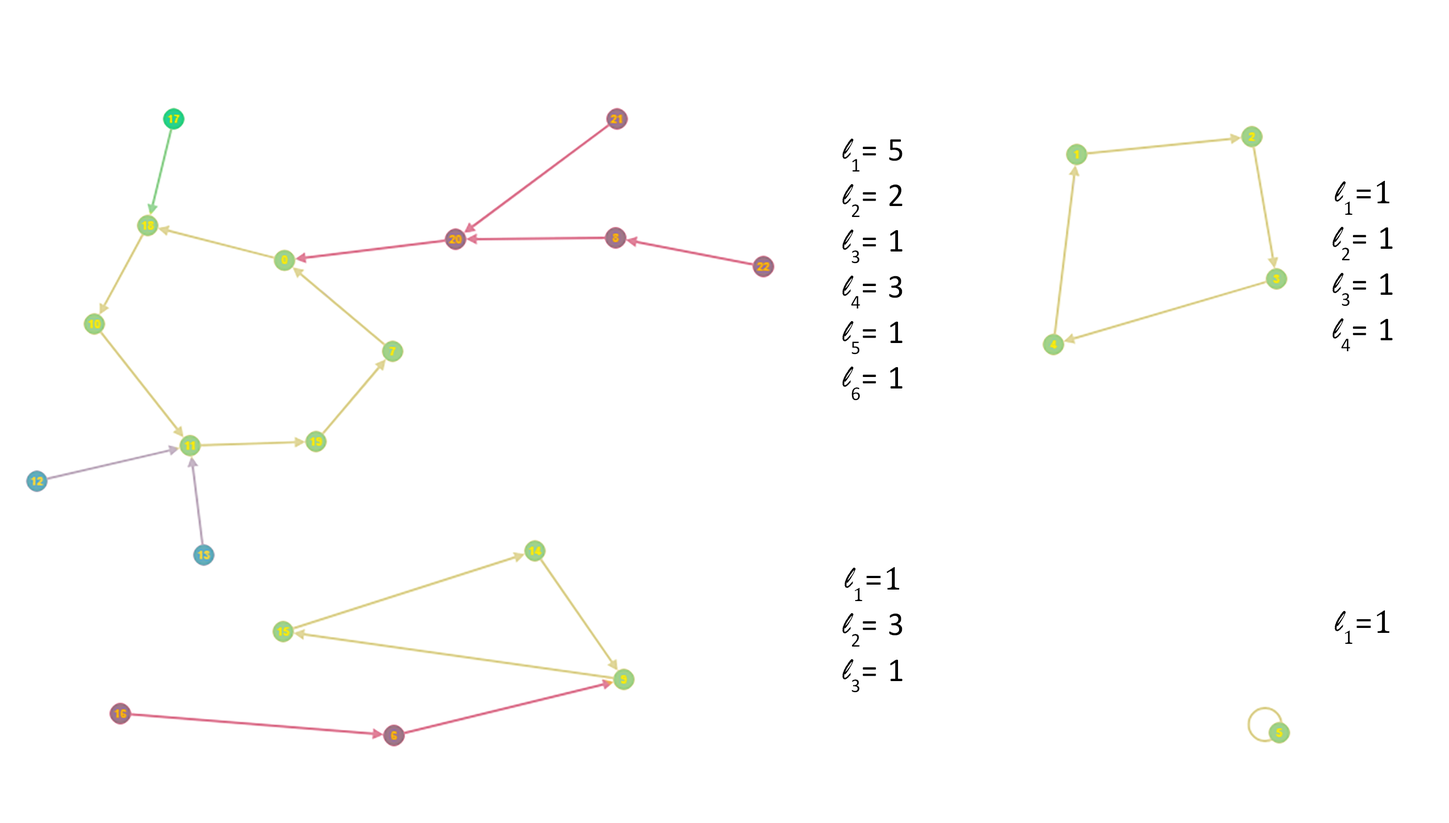
<style>
.page{position:relative;width:1449px;height:823px;background:#ffffff}
.page>*{position:absolute;margin:0}
.t1{font:33.6px/45.7px "Calibri";letter-spacing:0.04em;color:#000000;scale:0.97 1}
.t2{font:33.6px/45.7px "RageItalic";letter-spacing:0.04em;color:#000000;scale:0.97 1}
.t3{font:33.6px/45.7px "Cambria";letter-spacing:0.04em;color:#000000;scale:0.97 1}
.t4{font:33.6px "Cambria";letter-spacing:0.04em;color:#000000;scale:0.97 1}
.t5{font:33.6px "RageItalic";letter-spacing:0.04em;color:#000000;scale:0.97 1}
</style>
<div class="page">
<p class="t1" style="left:842px;top:139px;width:60px;height:262px;text-align:center"><span class="t2">l</span>1= 5<br><span class="t2">l</span>2= 2<br><span class="t2">l</span>3= 1<br><span class="t2">l</span>4= 3<br><span class="t2">l</span>5= 1<br><span class="t2">l</span>6= 1</p>
<p class="t1" style="left:1332px;top:181px;width:60px;height:170px;text-align:center"><span class="t2">l</span><span class="t3">1=1<br></span><span class="t2">l</span>2= 1<br><span class="t2">l</span>3= 1<br><span class="t2">l</span>4= 1</p>
<p class="t1" style="left:842px;top:567px;width:60px;height:126px;text-align:center"><span class="t2">l</span><span class="t3">1=1<br></span><span class="t2">l</span>2= 3<br><span class="t2">l</span>3= 1</p>
<p class="t4" style="left:1334px;top:611px;width:55px;height:33px"><span class="t5">l</span>1=1</p>
</div>
